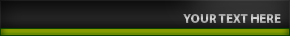
<style>
.page{position:relative;width:290px;height:36px}
.page>*{position:absolute;margin:0}
.t1{font:13px "MyriadPro-Bold"}
</style>
<div class="page">
<p class="t1" style="left:183px;top:14px;width:98px;height:9px">YOUR TEXT HERE</p>
</div>
